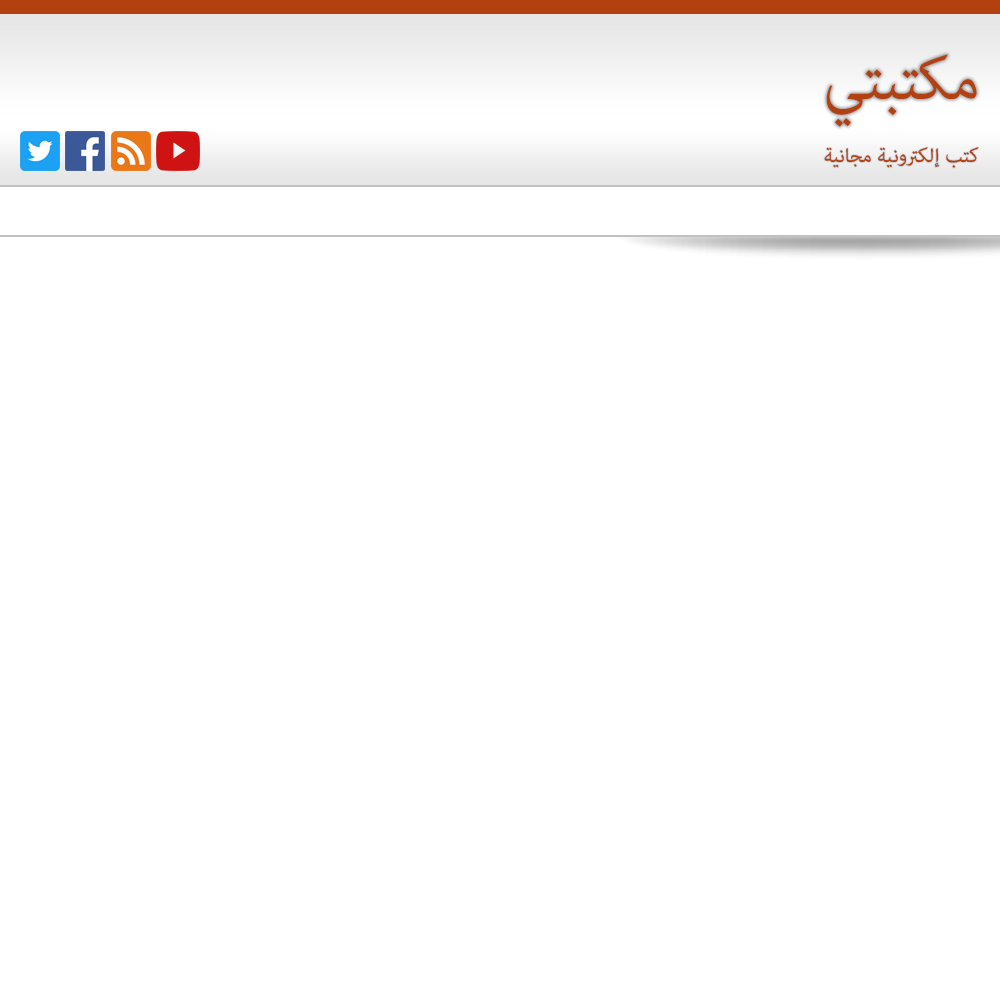
<style>
.page{position:relative;width:1000px;height:1000px;background:#ffffff}
.page>*{position:absolute;margin:0}
.t1{font:84px "AdobeArabic-Regular";color:#b3400f}
.t2{font:28px "AdobeArabic-Regular";color:#b3400f}
</style>
<div class="page">
<p class="t1" style="left:826px;top:54px;width:151px;height:73px">مكتبتي</p>
<p class="t2" style="left:824px;top:147px;width:155px;height:21px">كتب إلكترونية مجانية</p>
</div>
